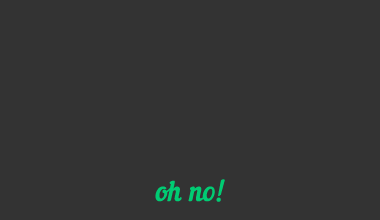
<style>
.page{position:relative;width:380px;height:220px;background:#333333}
.page>*{position:absolute;margin:0}
.t1{font:28.3px "NautilusPompilius";color:#00cc73}
</style>
<div class="page">
<p class="t1" style="left:155px;top:179px;width:70px;height:23px">oh no!</p>
</div>
